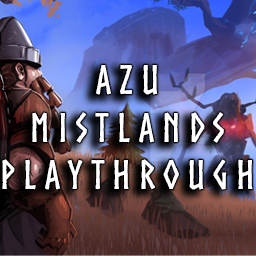
<style>
.page{position:relative;width:256px;height:256px}
.page>*{position:absolute;margin:0}
.t1{font:39.5px "Norse-Bold";letter-spacing:0.2em;color:#ffffff;text-transform:uppercase}
</style>
<div class="page">
<p class="t1" style="left:2px;top:65px;width:251px;height:125px;text-align:center">Azu<br>Mistlands<br>Playthrough</p>
</div>
